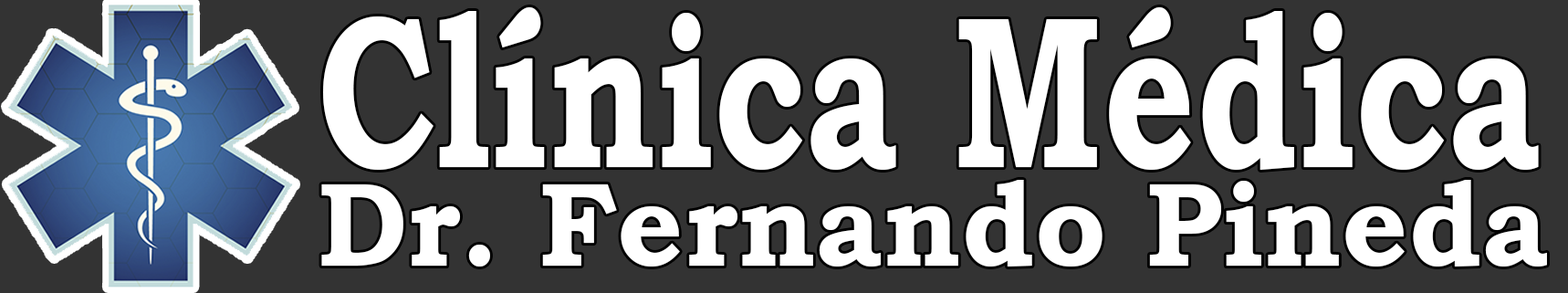
<style>
.page{position:relative;width:1568px;height:293px;background:#333333}
.page>*{position:absolute;margin:0}
.t1{font:119.5px "BookmanOldStyle-Bold";color:#ffffff;scale:0.97 1}
.t2{font:216.8px "BookmanOldStyle-Bold";color:#ffffff;scale:0.74 1}
</style>
<div class="page">
<p class="t1" style="left:321px;top:7px;width:1226px;height:260px"><span class="t2">Clínica Médica<br></span>Dr. Fernando Pineda</p>
</div>
